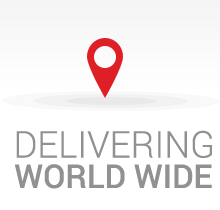
<style>
.page{position:relative;width:220px;height:210px;background:#ffffff}
.page>*{position:absolute;margin:0}
.t1{font:36.9px "Roboto-Light";color:#909191;text-transform:uppercase}
.t2{font:32.8px "Roboto-Medium";color:#909191;text-transform:uppercase}
</style>
<div class="page">
<p class="t1" style="left:16px;top:130px;width:196px;height:28px">DELIVERING</p>
<p class="t2" style="left:14px;top:164px;width:198px;height:25px">WORLD WIDE</p>
</div>
